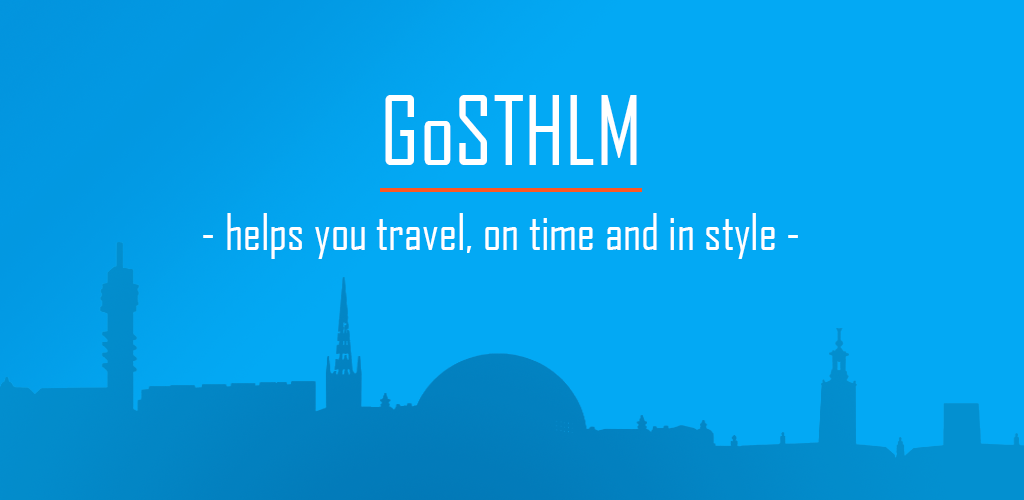
<style>
.page{position:relative;width:1024px;height:500px;background:#03a9f4}
.page>*{position:absolute;margin:0}
.t1{font:92px "AgencyFB-Reg";color:#ffffff}
.t2{font:48px "AgencyFB-Reg";color:#ffffff}
</style>
<div class="page">
<p class="t1" style="left:385px;top:95px;width:252px;height:70px">GoSTHLM</p>
<p class="t2" style="left:203px;top:213px;width:595px;height:46px">- helps you travel, on time and in style -</p>
</div>
